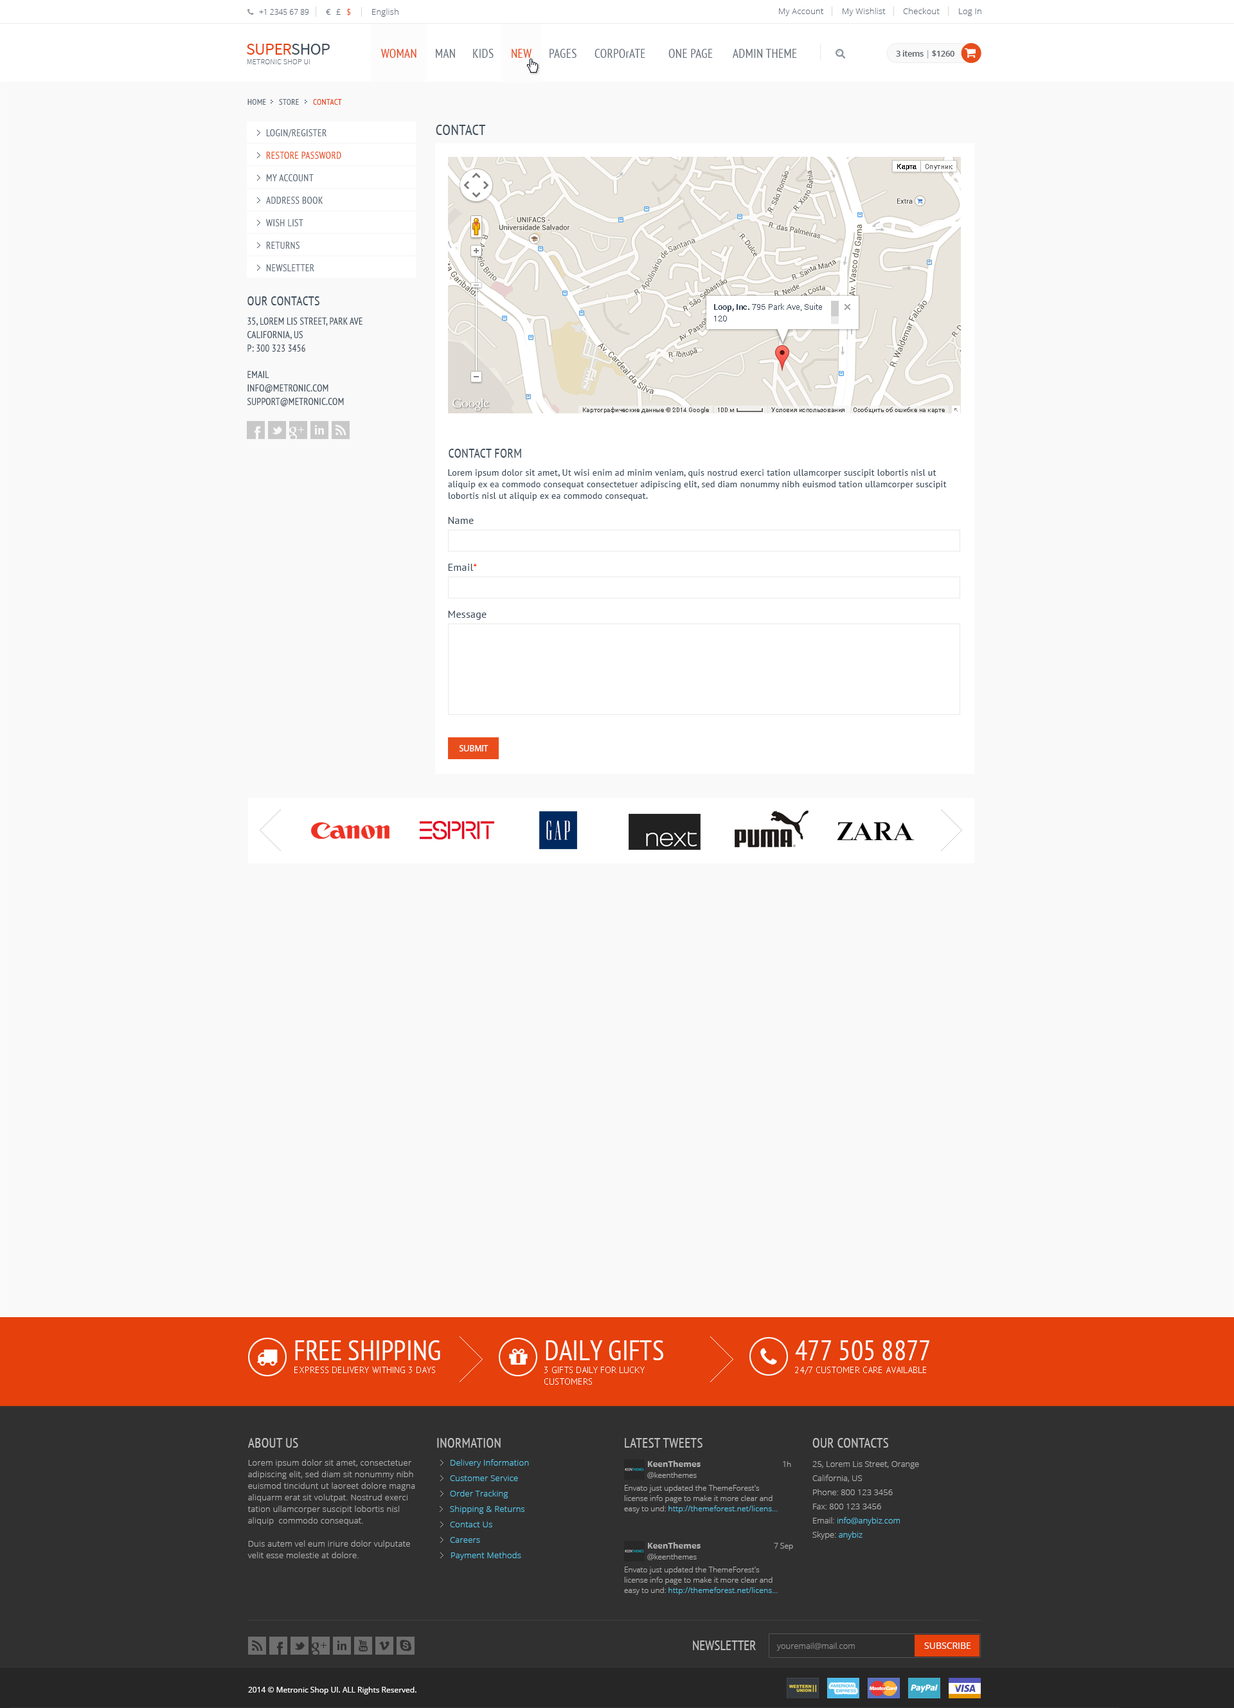
<style>
.page{position:relative;width:1234px;height:1708px;background:#f9f9f9}
.page>*{position:absolute;margin:0}
.t1{font:7.7px "OpenSans-Light";color:#616b76}
.t2{font:8.4px "OpenSans-Light";letter-spacing:-0.03em;color:#616b76}
.t3{font:8.4px "OpenSans-Light";letter-spacing:-0.03em;color:#e6400c}
.t4{font:8.4px "OpenSans-Light";letter-spacing:0.02em;color:#616b76}
.t5{font:16.7px "SourceSansPro-Regular";letter-spacing:-0.03em;color:#e6400c}
.t6{font:16.7px "SourceSansPro-Regular";letter-spacing:-0.03em;color:#3e4d5c}
.t7{font:12.2px "PTSans-Narrow";letter-spacing:0.02em;color:#e6400c}
.t8{font:12.2px "PTSans-Narrow";letter-spacing:0.02em;color:#616b76}
.t9{font:8.4px "OpenSans-Semibold";letter-spacing:-0.03em;color:#595f65}
.t10{font:8.4px "OpenSans-Semibold";letter-spacing:-0.03em;color:#a5aab0}
.t11{font:7.7px "SourceSansPro-ExtraLight";letter-spacing:0.02em;color:#616b76}
.t12{font:8.4px "PTSans-Narrow";letter-spacing:0.03em;color:#5f6d7b}
.t13{font:8.4px "PTSans-Narrow";letter-spacing:0.03em;color:#e6400c}
.t14{font:14.8px "PTSans-Narrow";letter-spacing:0.02em;color:#3e4d5c}
.t15{font:9.6px "PTSans-Narrow";letter-spacing:0.03em;color:#5f6d7b}
.t16{font:9.6px "PTSans-Narrow";letter-spacing:0.03em;color:#e84d1c}
.t17{font:9.6px "PTSans-Narrow";letter-spacing:0.03em;color:#5e6c7a}
.t18{font:9.6px/13.4px "PTSans-Narrow";letter-spacing:0.02em;color:#3e4d5c}
.t19{font:12.9px "PTSans-Narrow";letter-spacing:0.02em;color:#3e4d5c}
.t20{font:9.6px/3.7px "PTSans-Narrow";letter-spacing:0.02em;color:#3e4d5c}
.t21{font:9.6px/14px "PTSans-Narrow";letter-spacing:0.02em;color:#3e4d5c}
.t22{font:9.6px/14.8px "PTSans-Narrow";letter-spacing:0.02em;color:#3e4d5c}
.t23{font:9px/11.6px "PTSans-Regular";letter-spacing:0.02em;color:#3e4d5c}
.t24{font:9px/12.2px "PTSans-Regular";letter-spacing:0.02em;color:#3e4d5c}
.t25{font:10.3px "PTSans-Regular";letter-spacing:0.02em;color:#3e4d5c}
.t26{font:10.3px "PTSans-Regular";letter-spacing:0.02em;color:#ff3c00}
.t27{font:9px "MyriadPro-Regular";color:#ffffff}
.t28{font:27.6px "PTSans-Narrow";color:#ffffff}
.t29{font:9px "PTSans-Regular";color:#ffffff}
.t30{font:9px/11.6px "PTSans-Regular";color:#ffffff}
.t31{font:13.5px "PTSans-Narrow";letter-spacing:0.02em;color:#c2c1c1}
.t32{font:8.4px/11.6px "OpenSans-Light";letter-spacing:0.02em;color:#b0b0b0}
.t33{font:8.4px "OpenSans-Light";letter-spacing:0.02em;color:#57c8eb}
.t34{font:7.7px/10.9px "OpenSans-Light";color:#b1b1b1}
.t35{font:8.4px/11.6px "OpenSans-Bold";color:#b1b1b1}
.t36{font:7.7px/11.6px "OpenSans-Light";color:#b1b1b1}
.t37{font:8.4px/14.1px "OpenSans-Light";color:#b0b0b0}
.t38{font:8.4px/14.1px "OpenSans-Light";color:#56c8eb}
.t39{font:8.4px "OpenSans-Light";letter-spacing:0.02em;color:#56c8eb}
.t40{font:7.7px/10.3px "OpenSans-Light";color:#b0b0b0}
.t41{font:7.7px/9px "OpenSans-Light";color:#b0b0b0}
.t42{font:7.7px/10.3px "OpenSans-Light";letter-spacing:0.02em;color:#56c8eb}
.t43{font:13.5px "PTSans-Narrow";color:#c2c1c1}
.t44{font:8.4px "OpenSans-Light";color:#909090}
.t45{font:9px "OpenSans";color:#ffffff}
.t46{font:7.7px "OpenSans";color:#ffffff}
</style>
<div class="page">
<p class="t1" style="left:259px;top:9px;width:50px;height:6px">+1 2345 67 89</p>
<p class="t2" style="left:326px;top:8px;width:25px;height:7px">€   £   <span class="t3">$</span></p>
<p class="t4" style="left:372px;top:8px;width:27px;height:9px">English</p>
<p class="t4" style="left:779px;top:8px;width:45px;height:8px">My Account</p>
<p class="t4" style="left:843px;top:8px;width:43px;height:8px">My Wishlist</p>
<p class="t4" style="left:903px;top:8px;width:37px;height:6px">Checkout</p>
<p class="t4" style="left:959px;top:8px;width:23px;height:8px">Log In</p>
<p class="t5" style="left:247px;top:44px;width:83px;height:11px">SUPER<span class="t6">SHOP</span></p>
<p class="t7" style="left:381px;top:49px;width:36px;height:9px">WOMAN</p>
<p class="t8" style="left:436px;top:49px;width:19px;height:9px">MAN</p>
<p class="t8" style="left:473px;top:49px;width:21px;height:9px">KIDS</p>
<p class="t7" style="left:512px;top:49px;width:20px;height:9px">NEW</p>
<p class="t8" style="left:550px;top:49px;width:27px;height:9px">PAGES</p>
<p class="t8" style="left:595px;top:49px;width:50px;height:9px">CORPOrATE</p>
<p class="t8" style="left:669px;top:49px;width:44px;height:9px">ONE PAGE</p>
<p class="t8" style="left:733px;top:49px;width:64px;height:9px">ADMIN THEME</p>
<p class="t9" style="left:896px;top:50px;width:59px;height:9px">3 items <span class="t10">|</span> $1260</p>
<p class="t11" style="left:248px;top:59px;width:62px;height:5px">METRONIC SHOP UI</p>
<p class="t12" style="left:248px;top:99px;width:18px;height:6px">HOME</p>
<p class="t12" style="left:279px;top:99px;width:20px;height:6px">STORE</p>
<p class="t13" style="left:313px;top:99px;width:29px;height:6px">CONTACT</p>
<p class="t14" style="left:436px;top:125px;width:50px;height:10px">CONTACT</p>
<p class="t15" style="left:266px;top:129px;width:61px;height:9px">LOGIN/REGISTER</p>
<p class="t16" style="left:266px;top:152px;width:75px;height:7px">RESTORE PASSWORD</p>
<p class="t17" style="left:266px;top:174px;width:48px;height:7px">MY ACCOUNT</p>
<p class="t17" style="left:266px;top:197px;width:57px;height:7px">ADDRESS BOOK</p>
<p class="t17" style="left:266px;top:219px;width:37px;height:7px">WISH LIST</p>
<p class="t17" style="left:266px;top:242px;width:34px;height:7px">RETURNS</p>
<p class="t17" style="left:266px;top:264px;width:48px;height:7px">NEWSLETTER</p>
<p class="t18" style="left:247px;top:296px;width:116px;height:110px"><span class="t19">OUR CONTACTS<br><br></span><span class="t20">35, LOREM LIS STREET, PARK AVE<br></span>CALIFORNIA, US<br><span class="t21">P: 300 323 3456<br><br></span><span class="t22">EMAIL<br></span>INFO@METRONIC.COM<br>SUPPORT@METRONIC.COM</p>
<p class="t19" style="left:449px;top:449px;width:72px;height:9px">CONTACT FORM</p>
<p class="t23" style="left:448px;top:469px;width:499px;height:32px"><span class="t24">Lorem ipsum dolor sit amet, Ut wisi enim ad minim veniam, quis nostrud exerci tation ullamcorper suscipit lobortis nisl ut </span>aliquip ex ea commodo consequat consectetuer adipiscing elit, sed diam nonummy nibh euismod tation ullamcorper suscipit lobortis nisl ut aliquip ex ea commodo consequat.</p>
<p class="t25" style="left:448px;top:517px;width:26px;height:7px">Name</p>
<p class="t25" style="left:448px;top:564px;width:29px;height:7px">Email<span class="t26">*</span></p>
<p class="t25" style="left:448px;top:611px;width:39px;height:9px">Message</p>
<p class="t27" style="left:459px;top:745px;width:30px;height:7px">SUBMIT</p>
<p class="t28" style="left:295px;top:1340px;width:145px;height:20px">FREE SHIPPING</p>
<p class="t28" style="left:546px;top:1340px;width:117px;height:20px">DAILY GIFTS</p>
<p class="t28" style="left:795px;top:1340px;width:135px;height:20px">477 505 8877</p>
<p class="t29" style="left:294px;top:1367px;width:141px;height:6px">EXPRESS DELIVERY WITHING 3 DAYS</p>
<p class="t29" style="left:544px;top:1367px;width:101px;height:18px">3 GIFTS DAILY FOR LUCKY <br><span class="t30">CUSTOMERS</span></p>
<p class="t29" style="left:795px;top:1367px;width:131px;height:7px">24/7 CUSTOMER CARE AVAILABLE</p>
<p class="t31" style="left:248px;top:1438px;width:50px;height:10px">ABOUT US</p>
<p class="t31" style="left:437px;top:1438px;width:64px;height:10px">INORMATION</p>
<p class="t31" style="left:625px;top:1438px;width:78px;height:10px">LATEST TWEETS</p>
<p class="t31" style="left:813px;top:1438px;width:75px;height:10px">OUR CONTACTS</p>
<p class="t32" style="left:248px;top:1459px;width:167px;height:99px">Lorem ipsum dolor sit amet, consectetuer adipiscing elit, sed diam sit nonummy nibh euismod tincidunt ut laoreet dolore magna aliquarm erat sit volutpat. Nostrud exerci tation ullamcorper suscipit lobortis nisl aliquip  commodo consequat. <br><br>Duis autem vel eum iriure dolor vulputate velit esse molestie at dolore.</p>
<p class="t33" style="left:451px;top:1459px;width:78px;height:9px">Delivery Information</p>
<p class="t34" style="left:647px;top:1461px;width:144px;height:18px"><span class="t35">KeenThemes            </span><span class="t36">1h <br></span>@keenthemes</p>
<p class="t37" style="left:813px;top:1461px;width:106px;height:79px">25, Lorem Lis Street, Orange<br>California, US<br>Phone: 800 123 3456<br>Fax: 800 123 3456<br>Email: <span class="t38">info@anybiz.com<br></span>Skype: <span class="t38">anybiz</span></p>
<p class="t39" style="left:450px;top:1475px;width:68px;height:6px">Customer Service</p>
<p class="t39" style="left:450px;top:1490px;width:59px;height:8px">Order Tracking</p>
<p class="t40" style="left:624px;top:1485px;width:154px;height:28px">Envato just updated the ThemeForest's license info page to make it more clear and <span class="t41">easy to und: </span><span class="t42">http://themeforest.net/licens...</span></p>
<p class="t39" style="left:450px;top:1506px;width:75px;height:8px">Shipping &amp; Returns</p>
<p class="t39" style="left:450px;top:1522px;width:42px;height:5px">Contact Us</p>
<p class="t39" style="left:450px;top:1537px;width:30px;height:6px">Careers</p>
<p class="t39" style="left:451px;top:1552px;width:70px;height:8px">Payment Methods</p>
<p class="t34" style="left:647px;top:1542px;width:146px;height:18px"><span class="t35">KeenThemes        </span><span class="t36">7 Sep<br></span>@keenthemes</p>
<p class="t40" style="left:624px;top:1567px;width:154px;height:28px">Envato just updated the ThemeForest's license info page to make it more clear and <span class="t41">easy to und: </span><span class="t42">http://themeforest.net/licens...</span></p>
<p class="t43" style="left:693px;top:1641px;width:63px;height:9px">NEWSLETTER</p>
<p class="t44" style="left:777px;top:1643px;width:78px;height:8px">youremail@mail.com</p>
<p class="t45" style="left:924px;top:1643px;width:47px;height:6px">SUBSCRIBE</p>
<p class="t46" style="left:248px;top:1687px;width:169px;height:8px">2014 © Metronic Shop UI. ALL Rights Reserved.</p>
</div>
